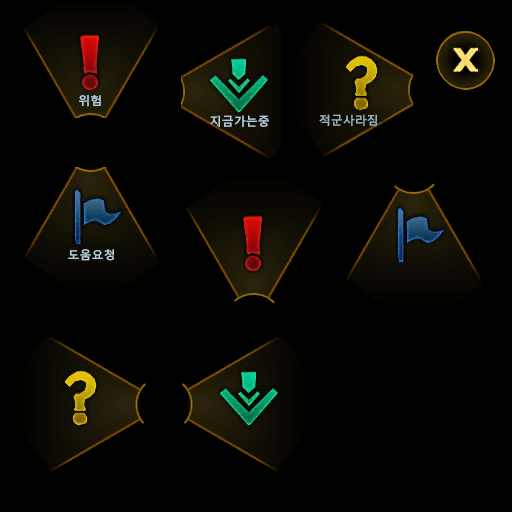
<style>
.page{position:relative;width:512px;height:512px;background:#000000}
.page>*{position:absolute;margin:0}
.t1{font:12px "MalgunGothicBold";color:#b5cfde}
.t2{font:12px "MalgunGothicBold";color:#9bb1be}
</style>
<div class="page">
<p class="t1" style="left:78px;top:95px;width:23px;height:12px">위험</p>
<p class="t1" style="left:210px;top:115px;width:59px;height:12px">지금가는중</p>
<p class="t2" style="left:319px;top:114px;width:58px;height:12px">적군사라짐</p>
<p class="t1" style="left:68px;top:249px;width:46px;height:12px">도움요청</p>
</div>
